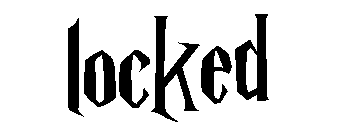
<style>
.page{position:relative;width:338px;height:135px;background:#ffffff}
.page>*{position:absolute;margin:0}
.t1{font:141px "HarryP";color:#000000;scale:0.86 1}
</style>
<div class="page">
<p class="t1" style="left:68px;top:14px;width:201px;height:108px">locked</p>
</div>
